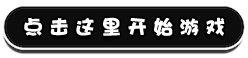
<style>
.page{position:relative;width:248px;height:58px;background:#0d0d0d}
.page>*{position:absolute;margin:0}
.t1{font:20px "DFPHaiBaoW12";letter-spacing:0.3em;color:#ffffff}
</style>
<div class="page">
<p class="t1" style="left:24px;top:17px;width:201px;height:19px">点击这里开始游戏</p>
</div>
